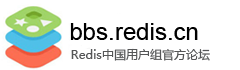
<style>
.page{position:relative;width:240px;height:70px;background:#ffffff}
.page>*{position:absolute;margin:0}
.t1{font:24px "ArialMT";color:#000000}
.t2{font:12px "MicrosoftYaHei";color:#555657}
</style>
<div class="page">
<p class="t1" style="left:70px;top:23px;width:128px;height:17px">bbs.redis.cn</p>
<p class="t2" style="left:71px;top:48px;width:139px;height:13px">Redis中国用户组官方论坛</p>
</div>
